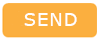
<style>
.page{position:relative;width:100px;height:40px;background:#fbaf3f}
.page>*{position:absolute;margin:0}
.t1{font:18px "Verdana";letter-spacing:0.05em;color:#ffffff}
</style>
<div class="page">
<p class="t1" style="left:24px;top:13px;width:53px;height:13px">SEND</p>
</div>
